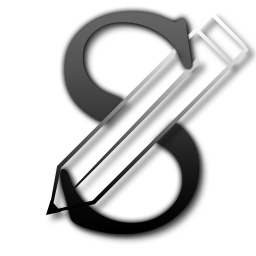
<style>
.page{position:relative;width:256px;height:256px;background:#ffffff}
.page>*{position:absolute;margin:0}
.t1{font:320px "GoudyOldStyleT-Regular";color:#000000}
</style>
<div class="page">
<p class="t1" style="left:60px;top:12px;width:139px;height:222px">S</p>
</div>
